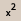
<style>
.page{position:relative;width:21px;height:21px;background:#d9cdc1}
.page>*{position:absolute;margin:0}
.t1{font:9px "Tahoma";color:#000000}
</style>
<div class="page">
<p class="t1" style="left:11px;top:3px;width:5px;height:7px">2</p>
<p class="t1" style="left:6px;top:11px;width:5px;height:5px">x</p>
</div>
